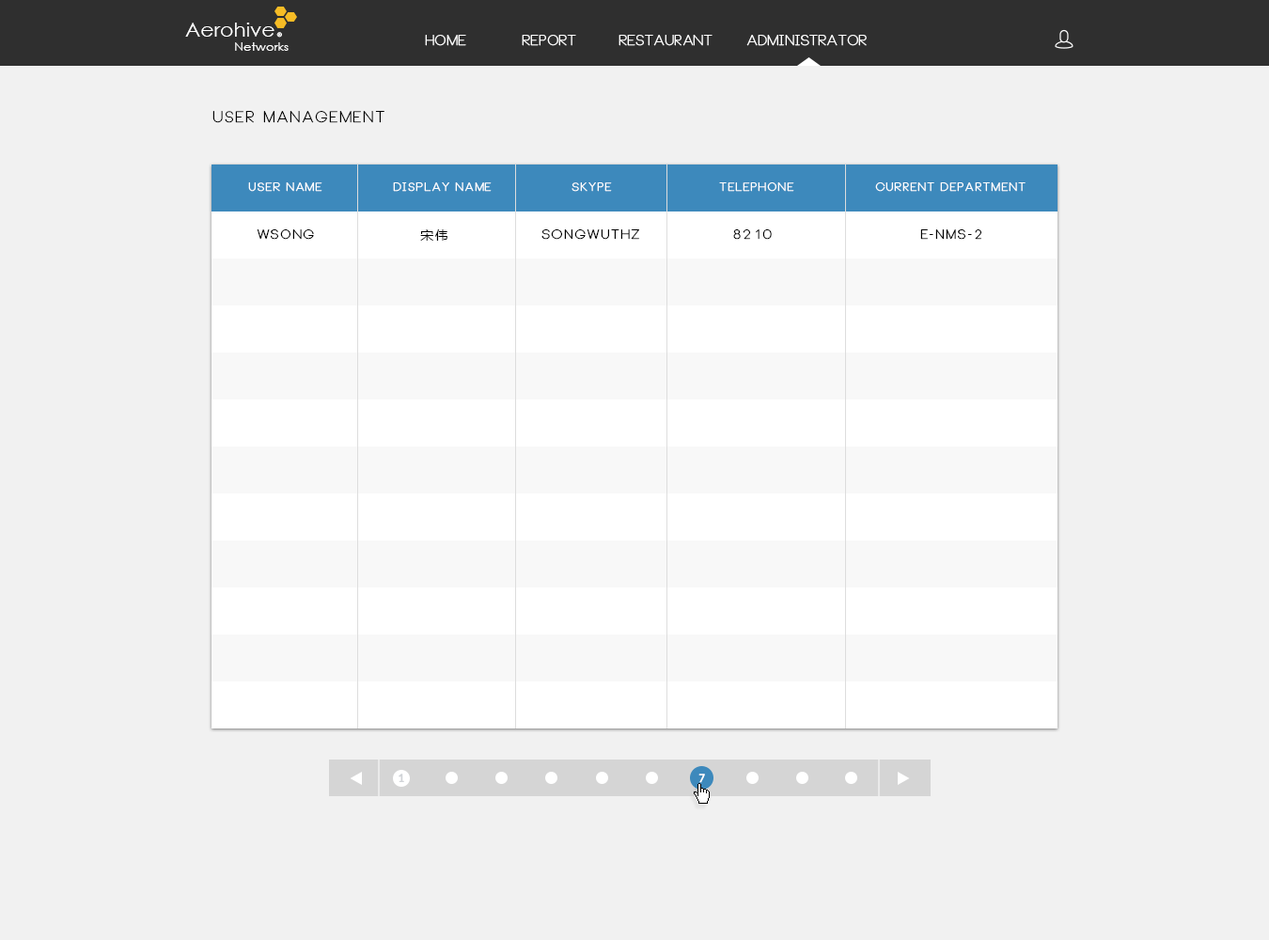
<style>
.page{position:relative;width:1269px;height:940px;background:#f1f1f1}
.page>*{position:absolute;margin:0}
.t1{font:19.3px "CenturyGothic";color:#ffffff;scale:1.07 1}
.t2{font:5.8px "CenturyGothic";color:#ffffff;scale:1.07 1}
.t3{font:14.1px "Neou-Thin";color:#ffffff;font-weight:bold}
.t4{font:11.6px "CenturyGothic";color:#ffffff;scale:1.07 1}
.t5{font:15px "Neou-Thin";letter-spacing:0.1em;color:#010101;font-weight:bold}
.t6{font:11.3px "Neou-Thin";letter-spacing:0.1em;color:#ffffff;font-weight:bold}
.t7{font:13.2px "Neou-Thin";letter-spacing:0.1em;color:#000000;font-weight:bold}
.t8{font:13.2px "MicrosoftYaHei";letter-spacing:0.1em;color:#000000}
.t9{font:13.2px "Neou-Thin";letter-spacing:0.1em;color:#010101;font-weight:bold}
.t10{font:11.3px "Lato-Bold";color:#d0d3d7;text-transform:uppercase}
.t11{font:12.2px "MyriadPro-Regular";color:#ffffff;text-transform:uppercase;font-weight:bold}
</style>
<div class="page">
<p class="t1" style="left:185px;top:23px;width:89px;height:14px">Aerohive</p>
<p class="t2" style="left:276px;top:32px;width:6px;height:6px">®</p>
<p class="t3" style="left:425px;top:35px;width:41px;height:11px">Home</p>
<p class="t3" style="left:522px;top:35px;width:54px;height:11px">Report</p>
<p class="t3" style="left:618px;top:35px;width:94px;height:11px">Restaurant</p>
<p class="t3" style="left:746px;top:35px;width:121px;height:11px">Administrator</p>
<p class="t4" style="left:235px;top:42px;width:54px;height:9px">Networks</p>
<p class="t5" style="left:212px;top:111px;width:172px;height:12px">User Management</p>
<p class="t6" style="left:248px;top:182px;width:74px;height:10px">USER name</p>
<p class="t6" style="left:393px;top:182px;width:99px;height:10px">display name</p>
<p class="t6" style="left:571px;top:182px;width:41px;height:10px">SKYPE</p>
<p class="t6" style="left:719px;top:182px;width:75px;height:10px">TELEPHONE</p>
<p class="t6" style="left:875px;top:182px;width:150px;height:10px">CURRENT DEPARTMENT</p>
<p class="t7" style="left:257px;top:229px;width:57px;height:11px">WSONG</p>
<p class="t8" style="left:420px;top:229px;width:27px;height:12px">宋伟</p>
<p class="t7" style="left:541px;top:229px;width:98px;height:11px">songwuthz</p>
<p class="t7" style="left:733px;top:229px;width:39px;height:11px">8210</p>
<p class="t9" style="left:920px;top:229px;width:61px;height:11px">E-NMS-2</p>
<p class="t10" style="left:398px;top:773px;width:6px;height:9px">1</p>
<p class="t11" style="left:698px;top:773px;width:7px;height:10px">7</p>
</div>
